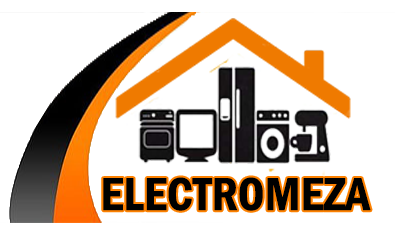
<style>
.page{position:relative;width:395px;height:234px;background:#ffffff}
.page>*{position:absolute;margin:0}
.t1{font:48px "FranklinGothic-DemiCond";color:#000000}
</style>
<div class="page">
<p class="t1" style="left:103px;top:177px;width:268px;height:34px">ELECTROMEZA</p>
</div>
